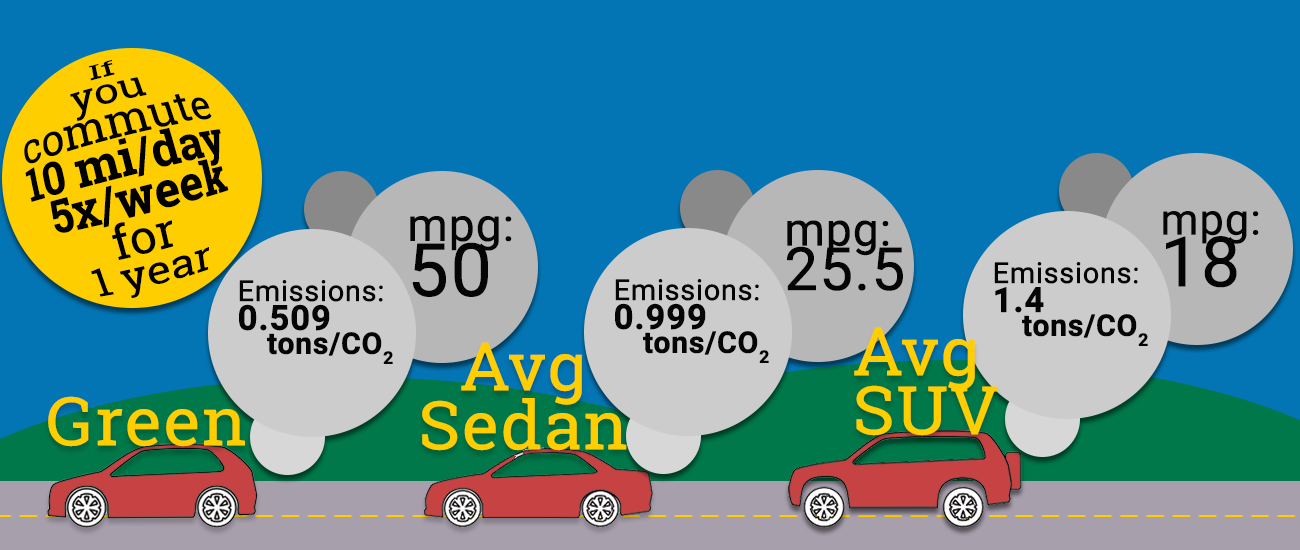
<style>
.page{position:relative;width:1300px;height:550px;background:#0375b4}
.page>*{position:absolute;margin:0}
.t1{font:36px/30px "RobotoSlab-Bold";color:#000000}
.t2{font:36px/30px "RobotoSlab-Regular";color:#000000}
.t3{font:45.9px "Roboto-Regular";color:#050505;font-weight:bold}
.t4{font:73.4px "Roboto-Regular";color:#050505;font-weight:bold}
.t5{font:59.4px "Roboto-Regular";color:#050505;font-weight:bold}
.t6{font:43.2px/31.1px "Roboto-Regular";color:#050505;font-weight:bold}
.t7{font:69.2px/51.9px "Roboto-Regular";color:#050505;font-weight:bold}
.t8{font:28.8px "Roboto-Regular";color:#050505;font-weight:bold}
.t9{font:34.6px/28.8px "Roboto-Bold";color:#050505;font-weight:bold}
.t10{font:30px/24px "Roboto-Bold";color:#050505;font-weight:bold}
.t11{font:66.7px "RobotoSlab-Regular";color:#ffce00;font-weight:bold;scale:1.03 1}
</style>
<div class="page">
<p class="t1" style="left:24px;top:60px;width:205px;height:238px;text-align:center;rotate:-14deg"><span class="t2">If you commute <br></span>10 mi/day<br> 5x/week<span class="t2"> <br>for <br>1 year</span></p>
<p class="t3" style="left:410px;top:216px;width:102px;height:81px">mpg: <span class="t4">50</span></p>
<p class="t3" style="left:787px;top:220px;width:116px;height:71px">mpg: <span class="t5">25.5</span></p>
<p class="t6" style="left:1163px;top:211px;width:96px;height:77px">mpg: <span class="t7"><br>18</span></p>
<p class="t8" style="left:994px;top:262px;width:154px;height:84px">Emissions: <br><span class="t9">1.4 <br></span><span class="t10"> tons/CO2</span></p>
<p class="t8" style="left:239px;top:280px;width:154px;height:84px">Emissions: <br><span class="t9">0.509 <br></span><span class="t10"> tons/CO2</span></p>
<p class="t8" style="left:615px;top:279px;width:154px;height:84px">Emissions: <br><span class="t9">0.999 <br></span><span class="t10"> tons/CO2</span></p>
<p class="t11" style="left:854px;top:327px;width:144px;height:109px">Avg SUV</p>
<p class="t11" style="left:422px;top:342px;width:205px;height:109px">Avg Sedan</p>
<p class="t11" style="left:48px;top:396px;width:197px;height:51px">Green</p>
</div>
